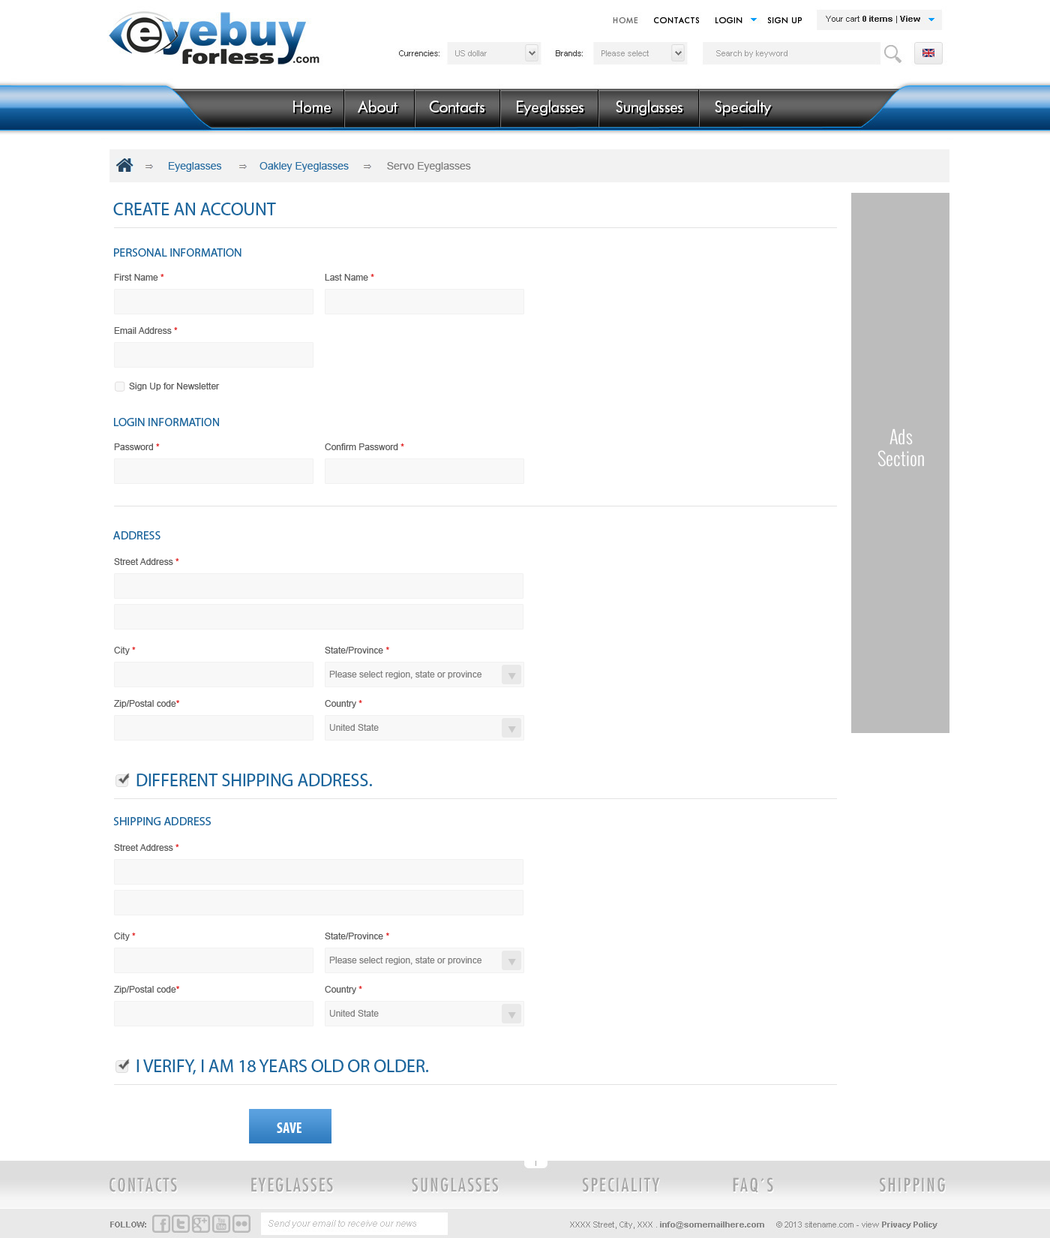
<style>
.page{position:relative;width:1050px;height:1238px;background:#ffffff}
.page>*{position:absolute;margin:0}
.t1{font:10.5px "ArialMT";color:#2b6fa3}
.t2{font:10.5px "ArialMT";color:#7f7f7f}
.t3{font:18px "MyriadPro-Regular";color:#1c659c;text-transform:uppercase}
.t4{font:12px "MyriadPro-Regular";color:#1c659c;text-transform:uppercase}
.t5{font:9px "ArialMT";color:#5b5b5b}
.t6{font:9px "ArialMT";color:#e12222}
.t7{font:18px "Oswald-Light";color:#ffffff}
.t8{font:9px "ArialMT";color:#7f7f7f}
.t9{font:15px "MyriadPro-BoldCond";color:#ffffff;text-transform:uppercase}
</style>
<div class="page">
<p class="t1" style="left:169px;top:162px;width:302px;height:10px">Eyeglasses             Oakley Eyeglasses             <span class="t2">Servo Eyeglasses</span></p>
<p class="t3" style="left:113px;top:202px;width:163px;height:13px">Create an Account</p>
<p class="t4" style="left:114px;top:248px;width:128px;height:8px">Personal information</p>
<p class="t5" style="left:114px;top:274px;width:50px;height:6px">First Name <span class="t6">*</span></p>
<p class="t5" style="left:325px;top:274px;width:49px;height:6px">Last Name <span class="t6">*</span></p>
<p class="t5" style="left:114px;top:327px;width:64px;height:7px">Email Address <span class="t6">*</span></p>
<p class="t5" style="left:129px;top:382px;width:91px;height:9px">Sign Up for Newsletter</p>
<p class="t4" style="left:114px;top:418px;width:105px;height:8px">login information</p>
<p class="t7" style="left:878px;top:428px;width:46px;height:38px;text-align:center">Ads<br>Section</p>
<p class="t5" style="left:114px;top:443px;width:46px;height:7px">Password <span class="t6">*</span></p>
<p class="t5" style="left:325px;top:443px;width:79px;height:7px">Confirm Password <span class="t6">*</span></p>
<p class="t4" style="left:113px;top:531px;width:47px;height:8px">Address</p>
<p class="t5" style="left:114px;top:558px;width:65px;height:7px">Street Address <span class="t6">*</span></p>
<p class="t5" style="left:114px;top:646px;width:22px;height:9px">City <span class="t6">*</span></p>
<p class="t5" style="left:325px;top:646px;width:64px;height:7px">State/Province <span class="t6">*</span></p>
<p class="t8" style="left:329px;top:670px;width:153px;height:9px">Please select region, state or province</p>
<p class="t5" style="left:114px;top:700px;width:65px;height:8px">Zip/Postal code<span class="t6">*</span></p>
<p class="t5" style="left:325px;top:700px;width:37px;height:8px">Country <span class="t6">*</span></p>
<p class="t8" style="left:329px;top:724px;width:50px;height:6px">United State</p>
<p class="t3" style="left:136px;top:773px;width:236px;height:13px">Different shipping address.</p>
<p class="t4" style="left:113px;top:817px;width:98px;height:8px">Shipping Address</p>
<p class="t5" style="left:114px;top:844px;width:65px;height:6px">Street Address <span class="t6">*</span></p>
<p class="t5" style="left:114px;top:932px;width:22px;height:8px">City <span class="t6">*</span></p>
<p class="t5" style="left:325px;top:932px;width:64px;height:7px">State/Province <span class="t6">*</span></p>
<p class="t8" style="left:329px;top:956px;width:153px;height:8px">Please select region, state or province</p>
<p class="t5" style="left:114px;top:986px;width:65px;height:8px">Zip/Postal code<span class="t6">*</span></p>
<p class="t5" style="left:325px;top:986px;width:37px;height:8px">Country <span class="t6">*</span></p>
<p class="t8" style="left:329px;top:1010px;width:50px;height:6px">United State</p>
<p class="t3" style="left:136px;top:1059px;width:293px;height:16px">I verify, I am 18 years old or older.</p>
<p class="t9" style="left:277px;top:1122px;width:25px;height:10px">Save</p>
</div>
